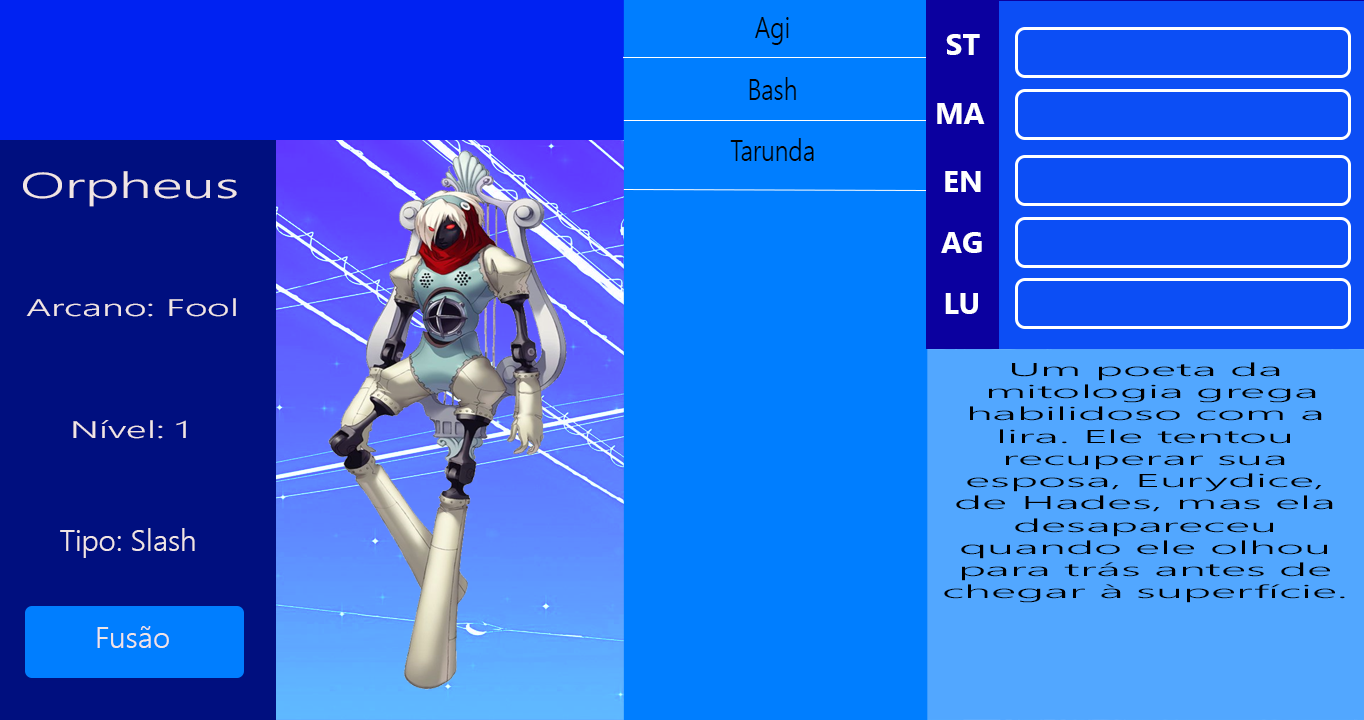
<style>
.page{position:relative;width:1364px;height:720px;background:#007eff}
.page>*{position:absolute;margin:0}
.t1{font:30px "NirmalaUI-Bold";color:#ffffff}
.t2{font:36px "NirmalaUI-Semilight";color:#f0e5e5;scale:1.65 1}
.t3{font:24px "NirmalaUI-Semilight";color:#f0e5e5;scale:1.65 1}
.t4{font:18.6px "NirmalaUI-Semilight";color:#000000;scale:2.64 1}
.t5{font:30px "NirmalaUI-Semilight";color:#f0e5e5}
</style>
<div class="page">
<p class="t1" style="left:946px;top:34px;width:34px;height:21px">ST</p>
<p class="t1" style="left:937px;top:103px;width:48px;height:21px">MA</p>
<p class="t2" style="left:23px;top:171px;width:214px;height:36px">Orpheus</p>
<p class="t1" style="left:945px;top:171px;width:36px;height:21px">EN</p>
<p class="t1" style="left:941px;top:232px;width:41px;height:21px">AG</p>
<p class="t1" style="left:945px;top:293px;width:33px;height:21px">LU</p>
<p class="t3" style="left:26px;top:298px;width:210px;height:19px">Arcano: Fool</p>
<p class="t4" style="left:944px;top:362px;width:401px;height:241px;text-align:center">Um poeta da<br> mitologia grega habilidoso com a lira. Ele tentou <br>recuperar sua esposa, Eurydice, de Hades, mas ela desapareceu quando ele olhou para trás antes de chegar à superfície.</p>
<p class="t3" style="left:73px;top:420px;width:113px;height:19px">Nível: 1</p>
<p class="t5" style="left:60px;top:528px;width:135px;height:30px">Tipo: Slash</p>
<p class="t5" style="left:97px;top:626px;width:72px;height:22px">Fusão</p>
</div>
